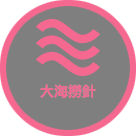
<style>
.page{position:relative;width:136px;height:136px;background:#7f7f7f}
.page>*{position:absolute;margin:0}
.t1{font:14px "LiHeiPro";color:#f56991}
</style>
<div class="page">
<p class="t1" style="left:40px;top:84px;width:56px;height:14px">大海撈針</p>
</div>
